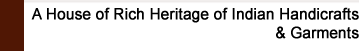
<style>
.page{position:relative;width:359px;height:51px;background:#ffffff}
.page>*{position:absolute;margin:0}
.t1{font:15.5px "ArialMT";color:#000000;font-weight:bold;scale:0.96 1}
</style>
<div class="page">
<p class="t1" style="left:31px;top:7px;width:328px;height:32px;text-align:right">A House of Rich Heritage of Indian Handicrafts<br>&amp; Garments</p>
</div>
